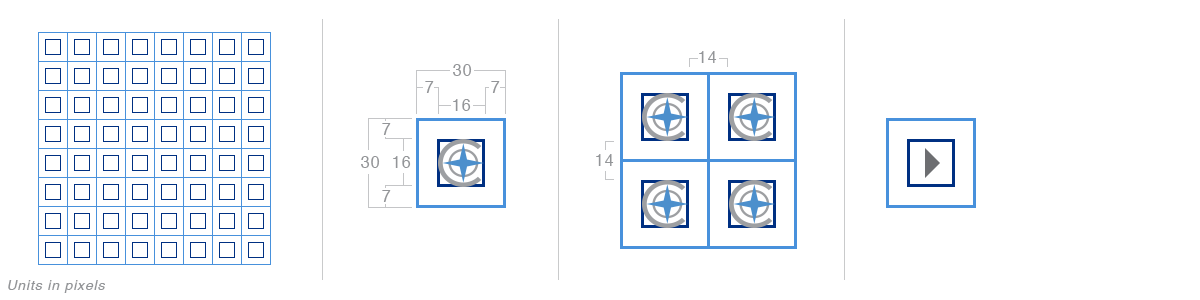
<style>
.page{position:relative;width:1200px;height:300px;background:#ffffff}
.page>*{position:absolute;margin:0}
.t1{font:16px "Helvetica";letter-spacing:0.06em;color:#939598}
.t2{font:14px "Helvetica-Oblique";letter-spacing:0.06em;color:#939598}
</style>
<div class="page">
<p class="t1" style="left:699px;top:51px;width:18px;height:12px">14</p>
<p class="t1" style="left:453px;top:64px;width:19px;height:12px">30</p>
<p class="t1" style="left:425px;top:81px;width:9px;height:12px">7</p>
<p class="t1" style="left:491px;top:81px;width:9px;height:12px">7</p>
<p class="t1" style="left:453px;top:99px;width:18px;height:12px">16</p>
<p class="t1" style="left:382px;top:123px;width:9px;height:12px">7</p>
<p class="t1" style="left:361px;top:156px;width:19px;height:12px">30</p>
<p class="t1" style="left:393px;top:156px;width:18px;height:12px">16</p>
<p class="t1" style="left:596px;top:154px;width:18px;height:12px">14</p>
<p class="t1" style="left:382px;top:190px;width:9px;height:12px">7</p>
<p class="t2" style="left:8px;top:280px;width:97px;height:13px">Units in pixels</p>
</div>
